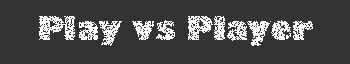
<style>
.page{position:relative;width:350px;height:64px;background:#333333}
.page>*{position:absolute;margin:0}
.t1{font:32px "GillSans-UltraBold";color:#ffffff}
</style>
<div class="page">
<p class="t1" style="left:39px;top:16px;width:275px;height:30px;opacity:0.79">Play vs Player</p>
</div>
